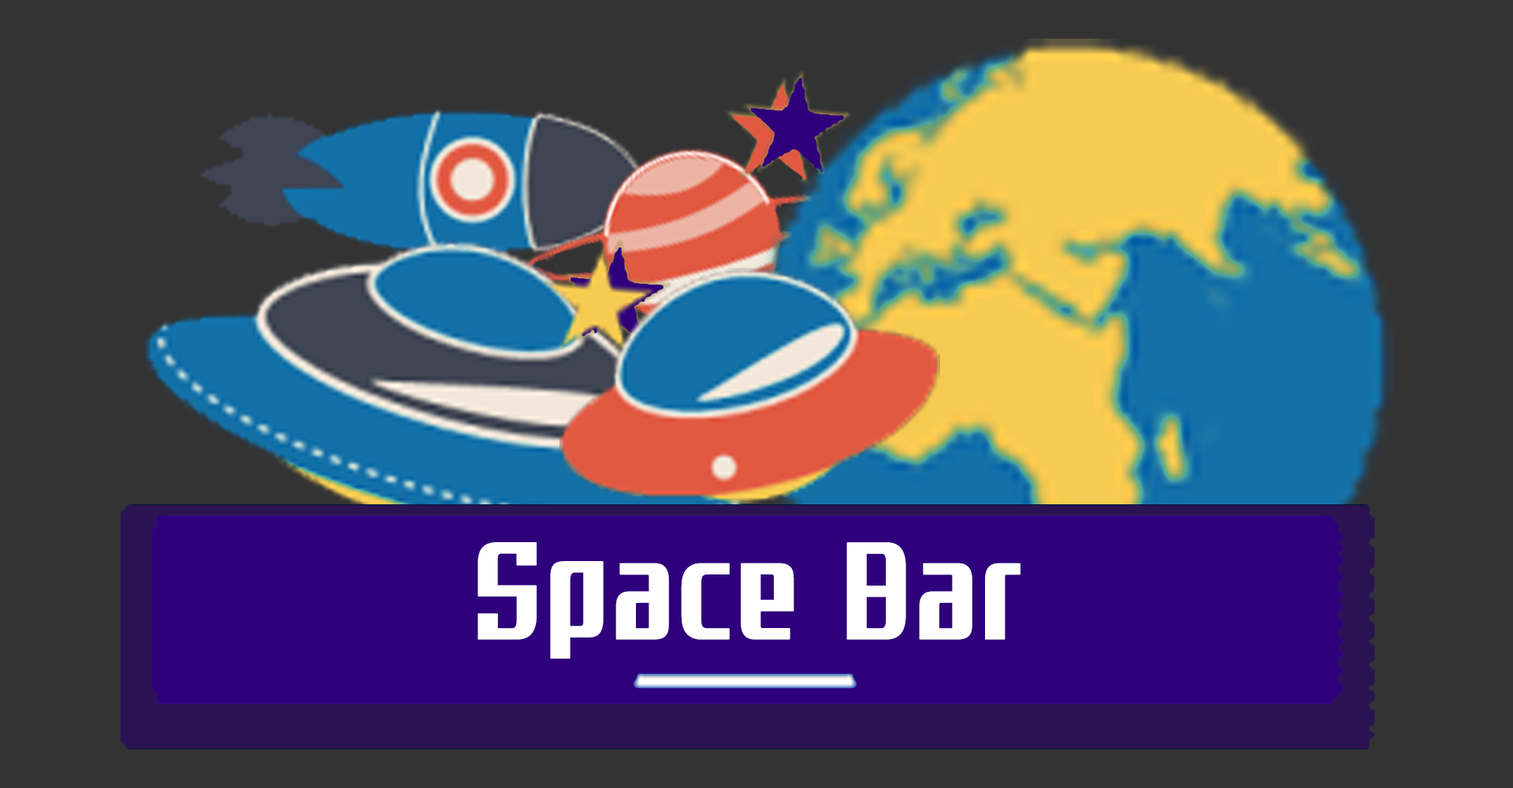
<style>
.page{position:relative;width:1513px;height:788px;background:#333333}
.page>*{position:absolute;margin:0}
.t1{font:158.3px "TTGaroseroB";color:#ffffff;font-weight:bold;scale:0.82 1}
</style>
<div class="page">
<p class="t1" style="left:478px;top:542px;width:543px;height:117px">Space Bar</p>
</div>
